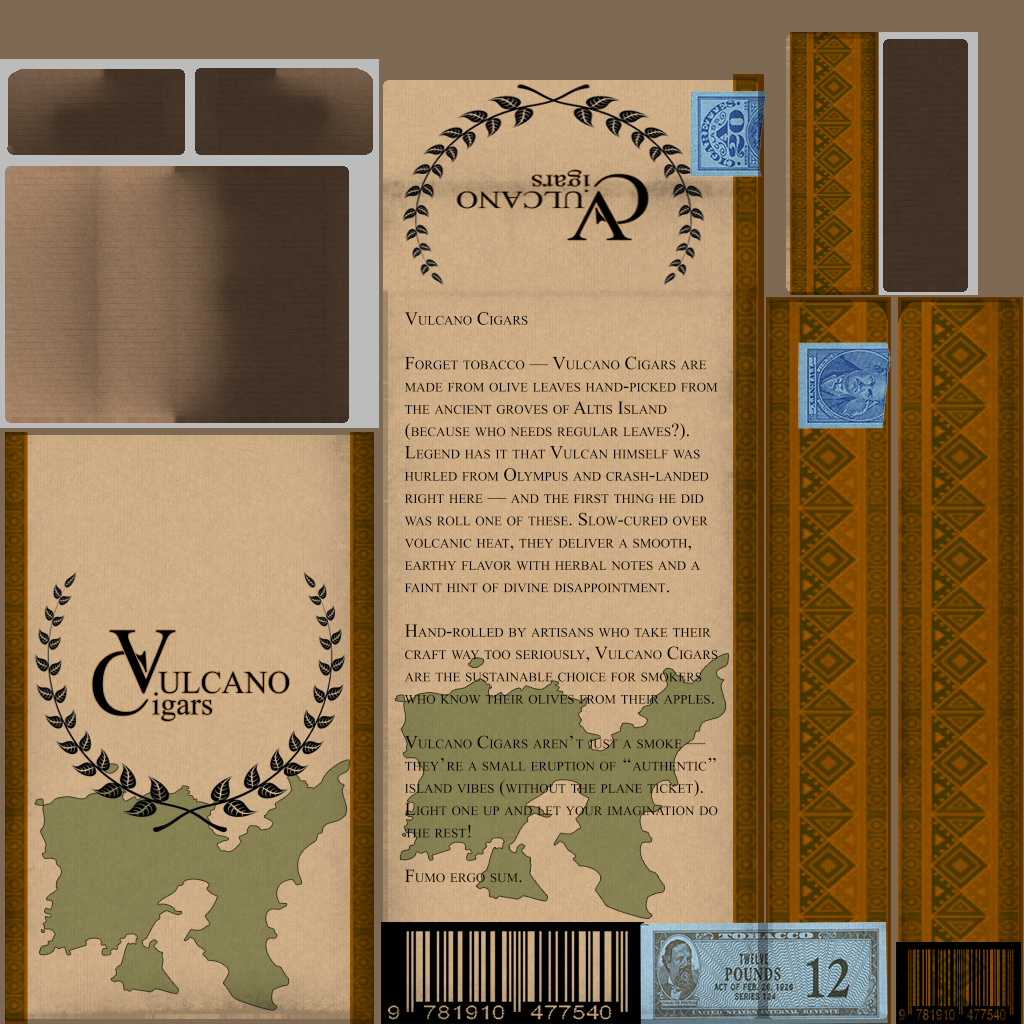
<style>
.page{position:relative;width:1024px;height:1024px}
.page>*{position:absolute;margin:0}
.t1{font:18.6px "MongolianBaiti";color:#000000;font-variant:small-caps}
</style>
<div class="page">
<p class="t1" style="left:404px;top:312px;width:314px;height:571px">Vulcano Cigars<br><br>Forget tobacco — Vulcano Cigars are made from olive leaves hand-picked from the ancient groves of Altis Island (because who needs regular leaves?). Legend has it that Vulcan himself was hurled from Olympus and crash-landed right here — and the first thing he did was roll one of these. Slow-cured over volcanic heat, they deliver a smooth, earthy flavor with herbal notes and a faint hint of divine disappointment.<br><br>Hand-rolled by artisans who take their craft way too seriously, Vulcano Cigars are the sustainable choice for smokers who know their olives from their apples.<br><br>Vulcano Cigars aren’t just a smoke — they’re a small eruption of “authentic” island vibes (without the plane ticket). Light one up and let your imagination do the rest!<br><br>Fumo ergo sum.</p>
</div>
